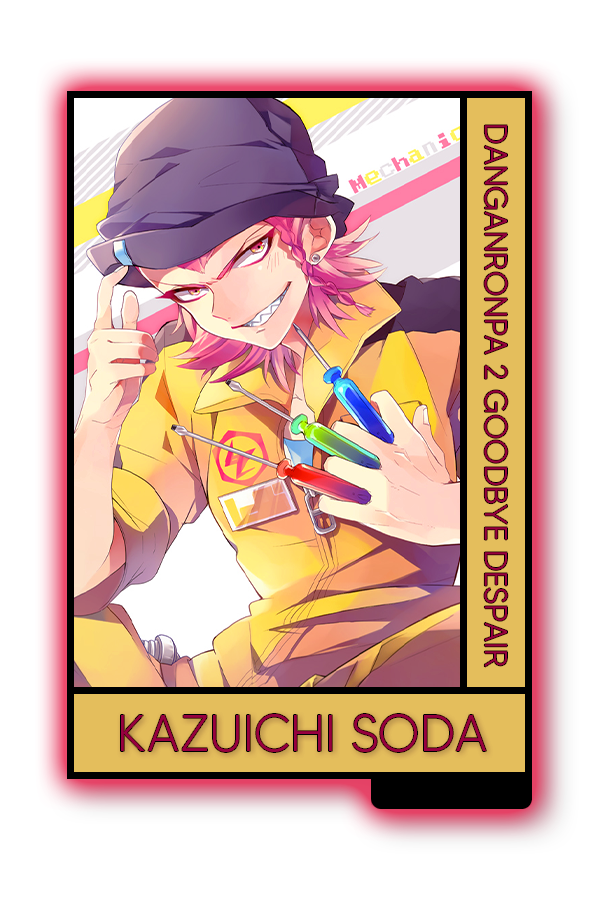
<style>
.page{position:relative;width:600px;height:900px;background:#ffffff}
.page>*{position:absolute;margin:0}
.t1{font:31.2px "MADETOMMY-Light";color:#880736}
.t2{font:51.4px "MADETOMMY-Light";color:#880736}
</style>
<div class="page">
<p class="t1" style="left:484px;top:125px;width:24px;height:542px;rotate:90deg">DANGANRONPA 2 GOODBYE DESPAIR</p>
<p class="t2" style="left:121px;top:714px;width:365px;height:38px">KAZUICHI SODA</p>
</div>
